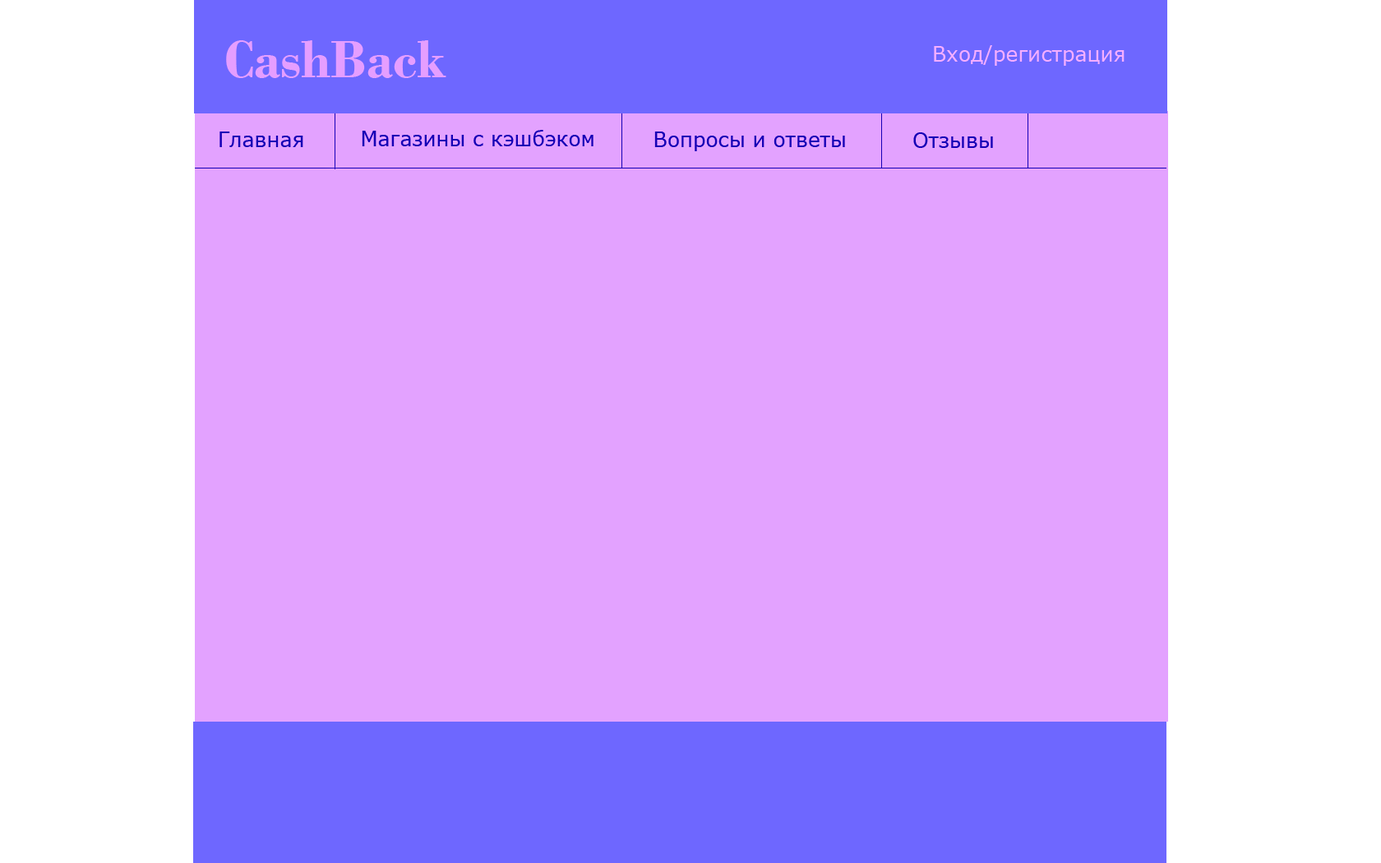
<style>
.page{position:relative;width:1381px;height:863px;background:#e3a2ff}
.page>*{position:absolute;margin:0}
.t1{font:54.8px "BodoniMT-Bold";color:#e59eff}
.t2{font:20.6px "MSReferenceSansSerif";color:#f5aeff}
.t3{font:20.6px "MSReferenceSansSerif";color:#1600b6}
</style>
<div class="page">
<p class="t1" style="left:226px;top:40px;width:220px;height:38px">CashBack</p>
<p class="t2" style="left:934px;top:45px;width:191px;height:21px">Вход/регистрация</p>
<p class="t3" style="left:220px;top:132px;width:83px;height:15px">Главная</p>
<p class="t3" style="left:362px;top:130px;width:232px;height:16px">Магазины с кэшбэком</p>
<p class="t3" style="left:654px;top:132px;width:191px;height:19px">Вопросы и ответы</p>
<p class="t3" style="left:913px;top:132px;width:80px;height:16px">Отзывы</p>
</div>
